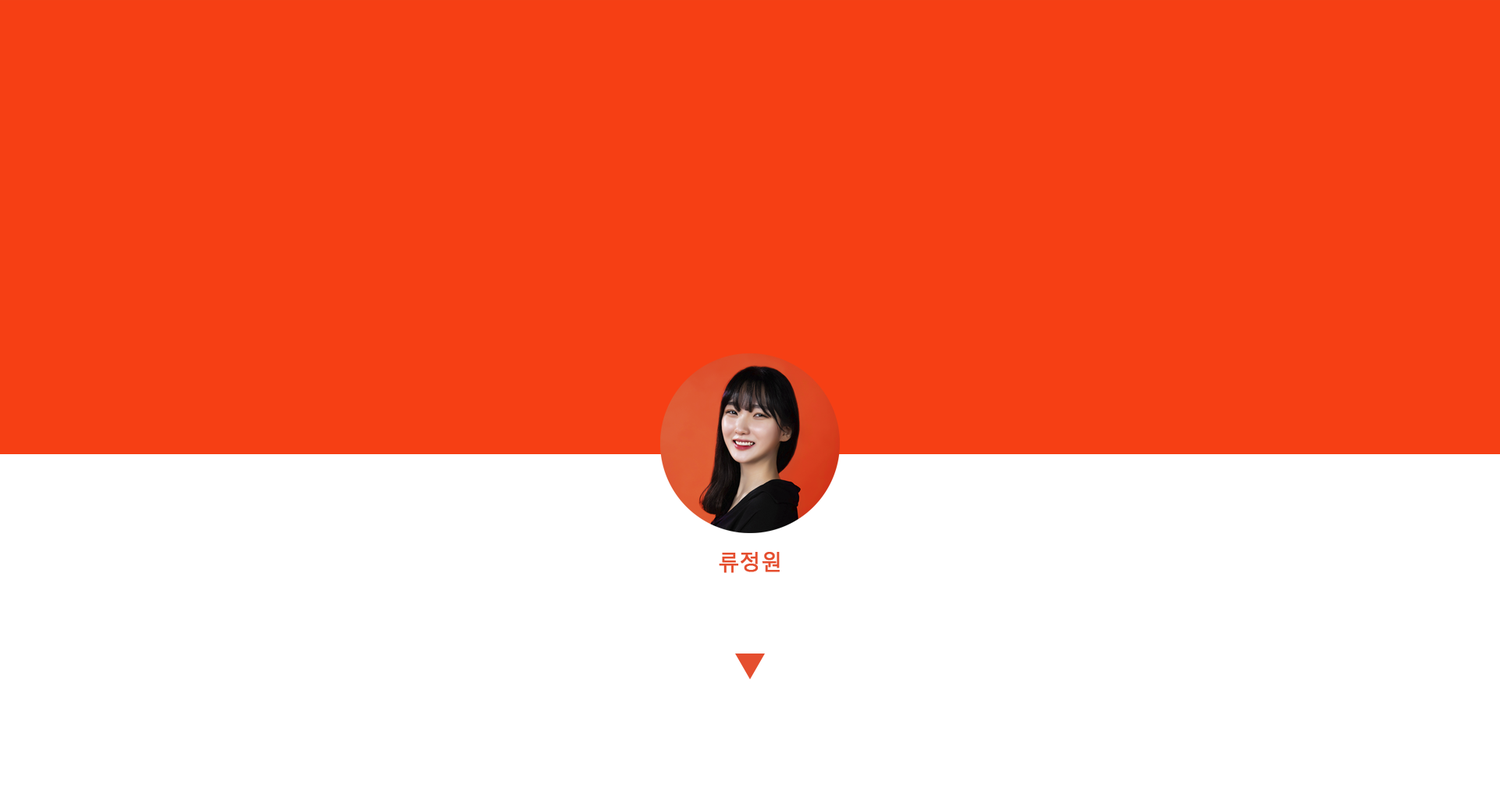
<style>
.page{position:relative;width:1500px;height:795px;background:#f63f14}
.page>*{position:absolute;margin:0}
.t1{font:20.8px "MalgunGothic";color:#e54e2f;font-weight:bold}
</style>
<div class="page">
<p class="t1" style="left:719px;top:552px;width:61px;height:21px">류정원</p>
</div>
